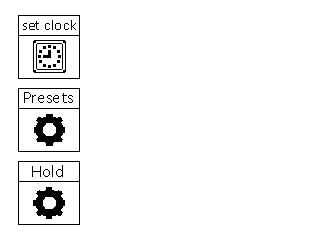
<style>
.page{position:relative;width:320px;height:240px;background:#ffffff}
.page>*{position:absolute;margin:0}
.t1{font:15.2px "Calibri";color:#000000}
.t2{font:17.2px "Calibri";color:#000000}
</style>
<div class="page">
<p class="t1" style="left:23px;top:20px;width:53px;height:10px">set clock</p>
<p class="t2" style="left:24px;top:92px;width:49px;height:11px">Presets</p>
<p class="t2" style="left:32px;top:165px;width:31px;height:12px">Hold</p>
</div>
